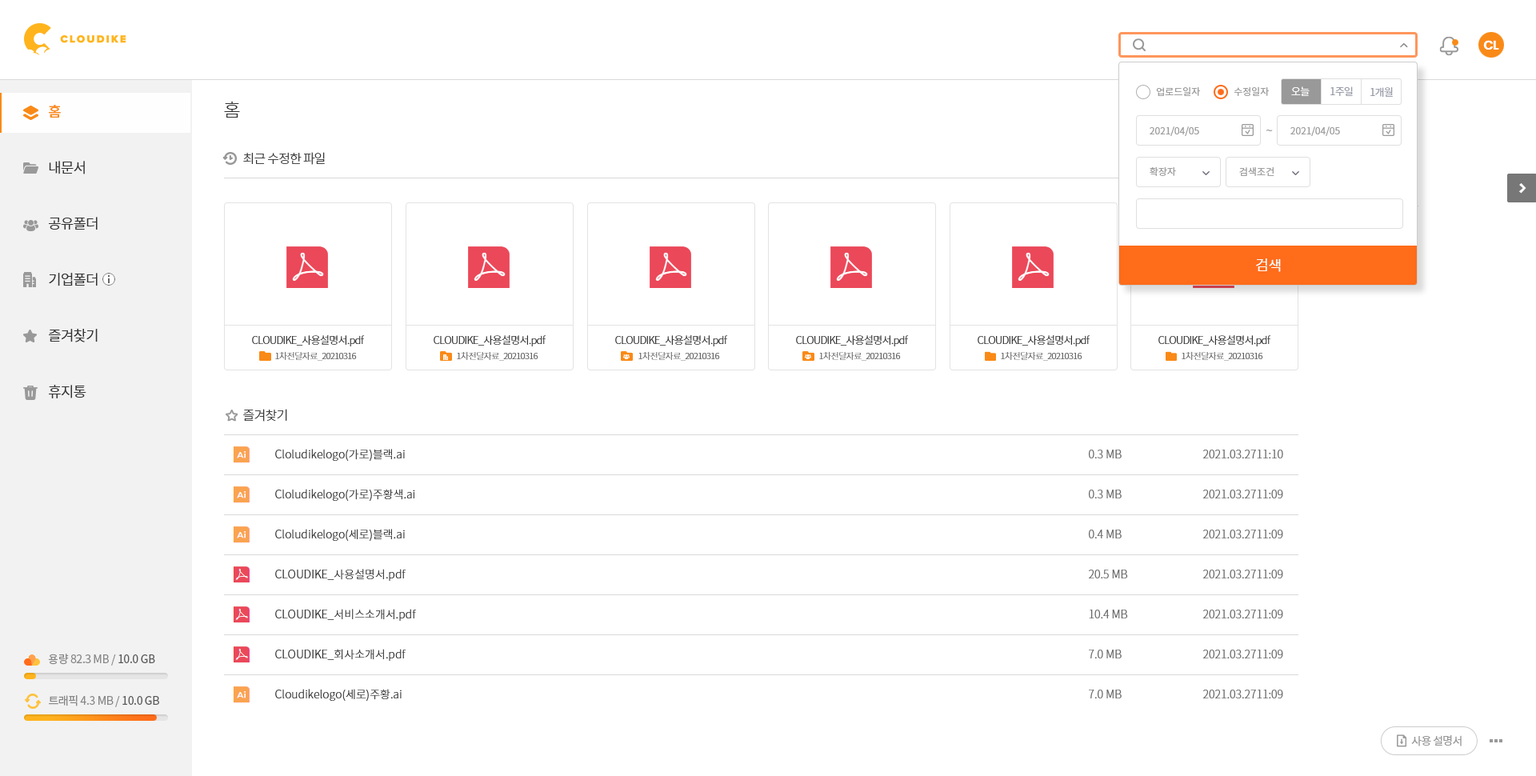
<style>
.page{position:relative;width:1536px;height:776px;background:#ffffff}
.page>*{position:absolute;margin:0}
.t1{font:12.8px "Poppins-SemiBold";letter-spacing:-0.05em;color:#ffffff}
.t2{font:9.6px "NotoSansCJKkr-DemiLight";color:#999999}
.t3{font:10.4px "NotoSansCJKkr-DemiLight";letter-spacing:-0.05em;color:#ffffff}
.t4{font:10.4px "NotoSansCJKkr-DemiLight";letter-spacing:-0.05em;color:#9598a5}
.t5{font:18.4px "NotoSansCJKkr-Light";letter-spacing:-0.05em;color:#333333}
.t6{font:14.4px/56px "NotoSansCJKkr-DemiLight";letter-spacing:-0.05em;color:#333333}
.t7{font:14.4px/56px "NotoSansCJKkr-Medium";letter-spacing:-0.05em;color:#f98a17}
.t8{font:12.8px "NotoSansCJKkr-DemiLight";color:#999999}
.t9{font:12.8px "NotoSansCJKkr-Light";letter-spacing:-0.05em;color:#333333}
.t10{font:14.4px "NotoSansCJKkr-DemiLight";color:#ffffff}
.t11{font:10.4px "NotoSansCJKkr-Light";letter-spacing:-0.05em;color:#333333}
.t12{font:8.8px "NotoSansCJKkr-Light";letter-spacing:-0.05em;color:#666666}
.t13{font:11.2px/40px "NotoSansCJKkr-Light";color:#333333}
.t14{font:11.2px/40px "NotoSansCJKkr-Light";color:#666666}
.t15{font:11.2px "NotoSansCJKkr-Regular";letter-spacing:-0.025em;color:#888888}
.t16{font:11.2px "NotoSansCJKkr-Regular";letter-spacing:-0.025em;color:#585858}
.t17{font:11.2px "NotoSansCJKkr-Regular";letter-spacing:-0.05em;color:#999999}
</style>
<div class="page">
<p class="t1" style="left:1484px;top:40px;width:16px;height:10px">CL</p>
<p class="t2" style="left:1156px;top:86px;width:45px;height:10px">업로드일자</p>
<p class="t2" style="left:1234px;top:86px;width:36px;height:10px">수정일자</p>
<p class="t3" style="left:1291px;top:86px;width:19px;height:10px">오늘</p>
<p class="t4" style="left:1331px;top:86px;width:22px;height:10px">1주일</p>
<p class="t4" style="left:1371px;top:87px;width:22px;height:10px">1개월</p>
<p class="t5" style="left:224px;top:101px;width:16px;height:17px">홈</p>
<p class="t6" style="left:49px;top:105px;width:49px;height:293px"><span class="t7">홈<br></span>내문서<br>공유폴더<br>기업폴더<br>즐겨찾기<br>휴지통</p>
<p class="t2" style="left:1150px;top:126px;width:49px;height:10px">2021/04/05</p>
<p class="t8" style="left:1266px;top:130px;width:7px;height:1px">~</p>
<p class="t2" style="left:1291px;top:126px;width:49px;height:10px">2021/04/05</p>
<p class="t9" style="left:243px;top:152px;width:82px;height:13px">최근 수정한 파일</p>
<p class="t2" style="left:1150px;top:167px;width:26px;height:9px">확장자</p>
<p class="t2" style="left:1239px;top:167px;width:36px;height:9px">검색조건</p>
<p class="t10" style="left:1256px;top:258px;width:25px;height:14px">검색</p>
<p class="t11" style="left:252px;top:335px;width:113px;height:11px">CLOUDIKE_사용설명서.pdf</p>
<p class="t11" style="left:434px;top:335px;width:113px;height:11px">CLOUDIKE_사용설명서.pdf</p>
<p class="t11" style="left:615px;top:335px;width:113px;height:11px">CLOUDIKE_사용설명서.pdf</p>
<p class="t11" style="left:796px;top:335px;width:113px;height:11px">CLOUDIKE_사용설명서.pdf</p>
<p class="t11" style="left:978px;top:335px;width:113px;height:11px">CLOUDIKE_사용설명서.pdf</p>
<p class="t11" style="left:1159px;top:335px;width:112px;height:11px">CLOUDIKE_사용설명서.pdf</p>
<p class="t12" style="left:275px;top:351px;width:82px;height:10px">1차전달자료_20210316</p>
<p class="t12" style="left:457px;top:351px;width:82px;height:10px">1차전달자료_20210316</p>
<p class="t12" style="left:639px;top:351px;width:81px;height:10px">1차전달자료_20210316</p>
<p class="t12" style="left:819px;top:351px;width:82px;height:10px">1차전달자료_20210316</p>
<p class="t12" style="left:1001px;top:351px;width:82px;height:10px">1차전달자료_20210316</p>
<p class="t12" style="left:1182px;top:351px;width:81px;height:10px">1차전달자료_20210316</p>
<p class="t9" style="left:243px;top:409px;width:44px;height:13px">즐겨찾기</p>
<p class="t13" style="left:275px;top:449px;width:141px;height:252px">Cloludikelogo(가로)블랙.ai<br>Cloludikelogo(가로)주황색.ai<br>Cloludikelogo(세로)블랙.ai<br>CLOUDIKE_사용설명서.pdf<br>CLOUDIKE_서비스소개서.pdf<br>CLOUDIKE_회사소개서.pdf<br>Cloudikelogo(세로)주황.ai</p>
<p class="t14" style="left:1089px;top:450px;width:39px;height:249px">0.3 MB<br>0.3 MB<br>0.4 MB<br>20.5 MB<br>10.4 MB<br>7.0 MB<br>7.0 MB</p>
<p class="t14" style="left:1203px;top:450px;width:80px;height:249px">2021.03.2711:10<br>2021.03.2711:09<br>2021.03.2711:09<br>2021.03.2711:09<br>2021.03.2711:09<br>2021.03.2711:09<br>2021.03.2711:09</p>
<p class="t15" style="left:48px;top:654px;width:107px;height:12px">용량 82.3 MB / <span class="t16">10.0 GB</span></p>
<p class="t15" style="left:49px;top:695px;width:110px;height:12px">트래픽 4.3 MB / <span class="t16">10.0 GB</span></p>
<p class="t17" style="left:1411px;top:735px;width:51px;height:12px">사용 설명서</p>
</div>
